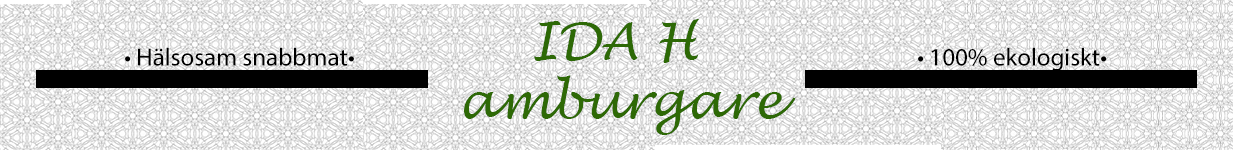
<style>
.page{position:relative;width:1233px;height:150px}
.page>*{position:absolute;margin:0}
.t1{font:50px "LucidaHandwriting-Italic";color:#2d6906}
.t2{font:25px "MyriadPro-Regular";color:#000000}
.t3{font:50px "LucidaHandwriting-Italic";color:#2e6906}
</style>
<div class="page">
<p class="t1" style="left:534px;top:19px;width:166px;height:44px">IDA H</p>
<p class="t2" style="left:125px;top:47px;width:229px;height:19px">• Hälsosam snabbmat•</p>
<p class="t2" style="left:918px;top:47px;width:189px;height:24px">• 100% ekologiskt•</p>
<p class="t3" style="left:464px;top:75px;width:332px;height:60px">amburgare</p>
</div>
